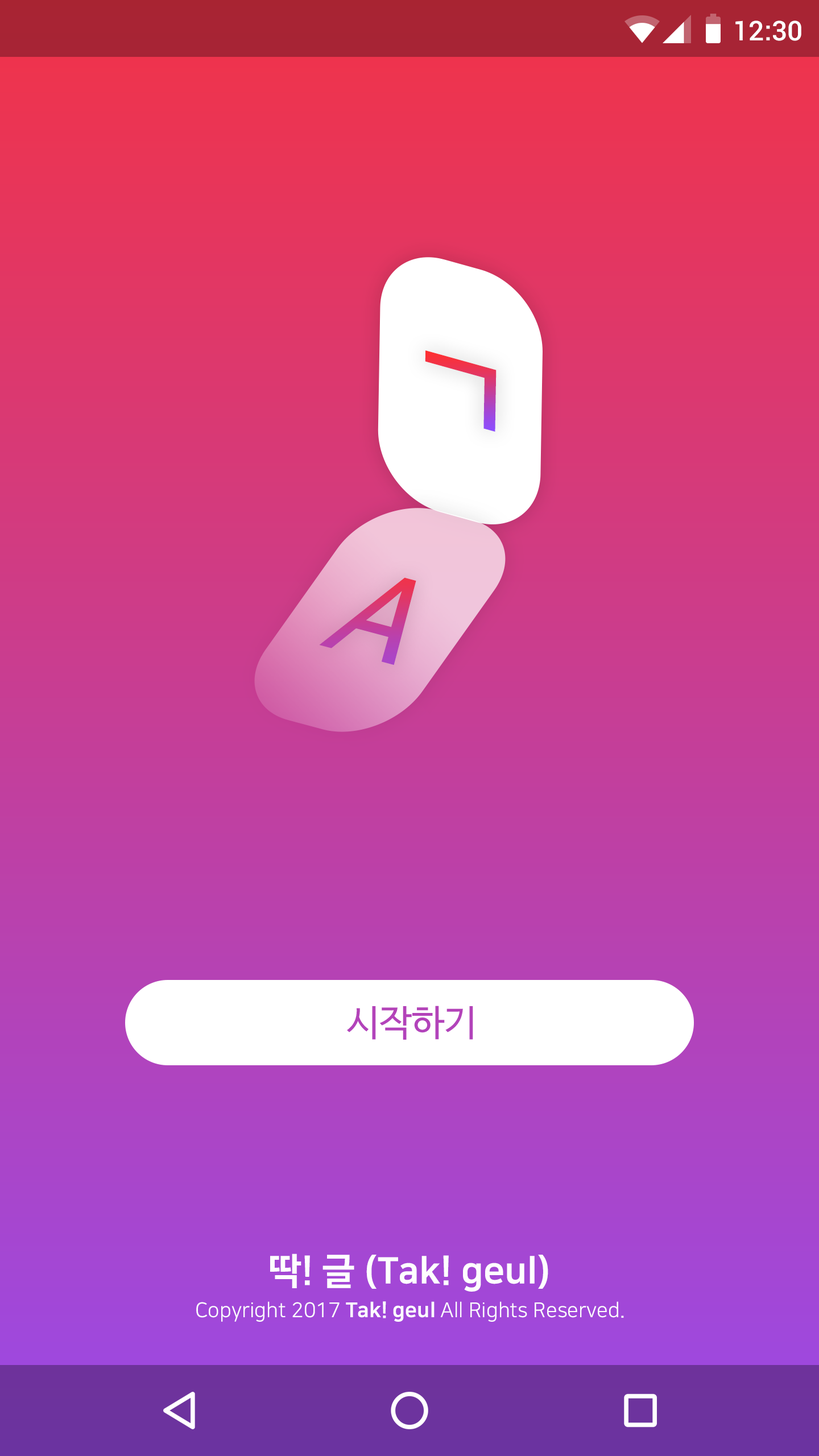
<style>
.page{position:relative;width:819px;height:1456px}
.page>*{position:absolute;margin:0}
.t1{font:27.3px "Roboto-Medium";color:#ffffff}
.t2{font:126.3px "NanumSquareOTFB"}
.t3{font:128.6px "NanumSquareOTFB";scale:0.95 1}
.t4{font:36.4px "NanumSquareOTFEB";color:#fefefe}
.t5{font:20.5px "NanumSquareOTFR";color:#fefefe}
.t6{font:20.5px "NanumSquareOTFEB";color:#fefefe}
</style>
<div class="page">
<p class="t1" style="left:735px;top:20px;width:66px;height:21px">12:30</p>
<p class="t2" style="left:425px;top:350px;width:72px;height:82px;rotate:16deg">ㄱ</p>
<p class="t3" style="left:319px;top:577px;width:97px;height:88px;rotate:15deg">A</p>
<p class="t4" style="left:270px;top:1254px;width:278px;height:38px">딱! 글 (Tak! geul)</p>
<p class="t5" style="left:196px;top:1301px;width:428px;height:21px">Copyright 2017 <span class="t6">Tak! geul</span> All Rights Reserved.</p>
</div>
